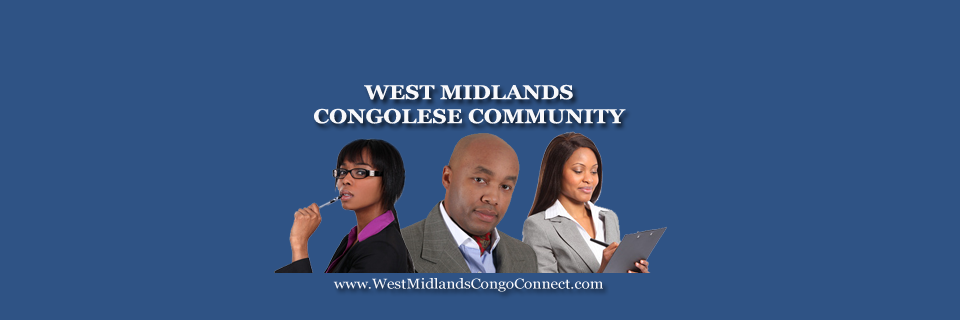
<style>
.page{position:relative;width:960px;height:320px;background:#2f5385}
.page>*{position:absolute;margin:0}
.t1{font:20px "Georgia-Bold";color:#f8f8fa;scale:1.1 1}
.t2{font:14px "Georgia";color:#f8f8fb;scale:1.1 1}
</style>
<div class="page">
<p class="t1" style="left:314px;top:84px;width:312px;height:40px;text-align:center">WEST MIDLANDS <br>CONGOLESE COMMUNITY</p>
<p class="t2" style="left:333px;top:278px;width:270px;height:14px">www.WestMidlandsCongoConnect.com</p>
</div>
